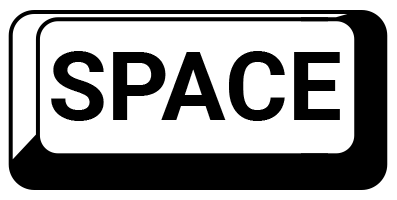
<style>
.page{position:relative;width:397px;height:200px;background:#ffffff}
.page>*{position:absolute;margin:0}
.t1{font:96.4px "Roboto-Bold";color:#000000}
</style>
<div class="page">
<p class="t1" style="left:51px;top:51px;width:289px;height:70px">SPACE</p>
</div>
